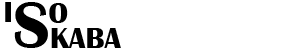
<style>
.page{position:relative;width:300px;height:50px;background:#ffffff}
.page>*{position:absolute;margin:0}
.t1{font:30.2px "BritannicBold";color:#000000;text-transform:uppercase}
.t2{font:67.1px "BritannicBold";color:#000000;text-transform:uppercase}
</style>
<div class="page">
<p class="t1" style="left:5px;top:2px;width:6px;height:20px">I</p>
<p class="t2" style="left:14px;top:2px;width:34px;height:46px">S</p>
<p class="t1" style="left:49px;top:3px;width:19px;height:20px">o</p>
<p class="t1" style="left:51px;top:28px;width:70px;height:20px">kaba</p>
</div>
